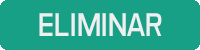
<style>
.page{position:relative;width:200px;height:50px;background:#17a085}
.page>*{position:absolute;margin:0}
.t1{font:33.3px "AeroMaticsRegular";color:#ecf0f1}
</style>
<div class="page">
<p class="t1" style="left:39px;top:13px;width:123px;height:23px">ELIMINAR</p>
</div>
